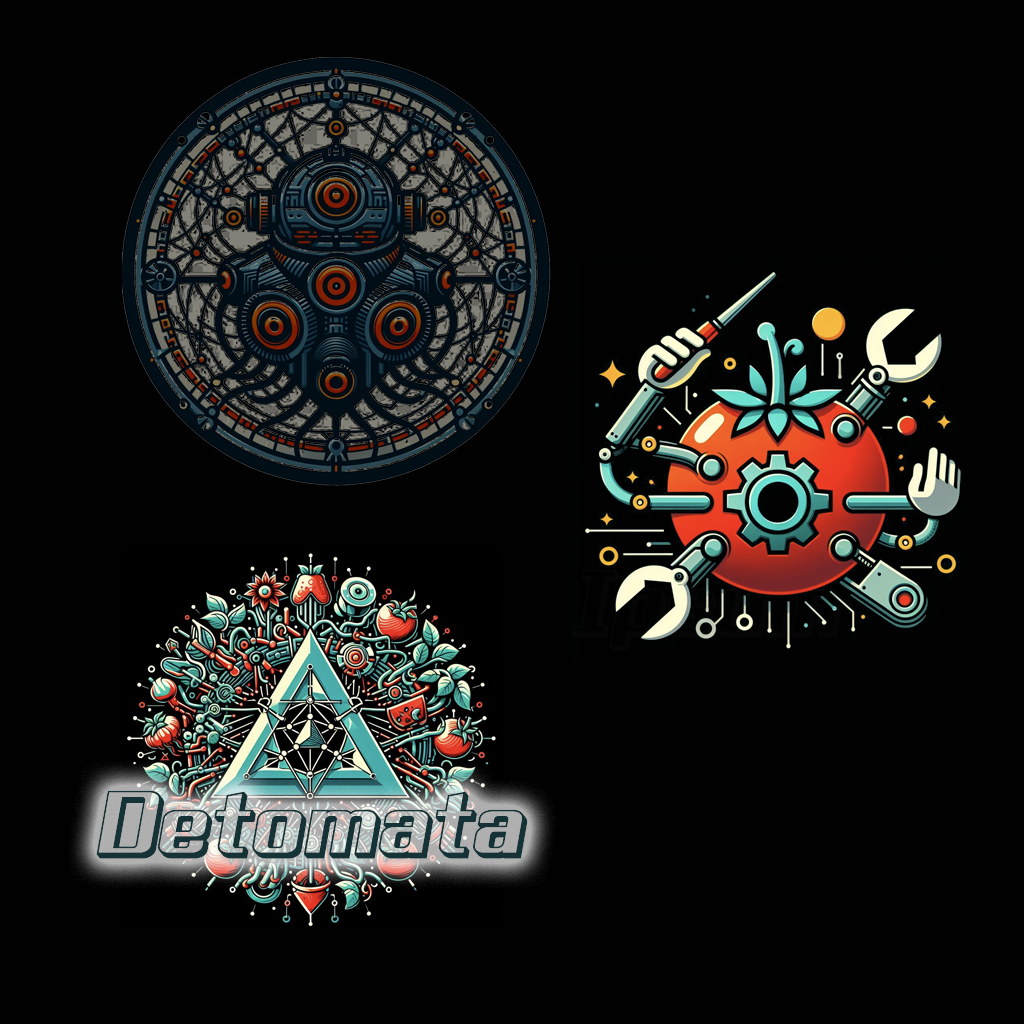
<style>
.page{position:relative;width:1024px;height:1024px;background:#010101}
.page>*{position:absolute;margin:0}
.t1{font:72px "RixSuperRobotPObliqueShadow";color:#153236}
</style>
<div class="page">
<p class="t1" style="left:96px;top:790px;width:432px;height:69px">Detomata</p>
<p class="t1" style="left:96px;top:790px;width:432px;height:69px">Detomata</p>
</div>
